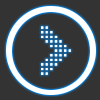
<style>
.page{position:relative;width:100px;height:100px;background:#333333}
.page>*{position:absolute;margin:0}
.t1{font:46.4px "TripleDotDigital-7";color:#ffffff}
</style>
<div class="page">
<p class="t1" style="left:41px;top:26px;width:30px;height:49px">&gt;</p>
</div>
